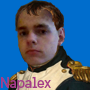
<style>
.page{position:relative;width:90px;height:90px;background:#006dcc}
.page>*{position:absolute;margin:0}
.t1{font:14.7px "SwedenSans";color:#a63b89}
</style>
<div class="page">
<p class="t1" style="left:1px;top:77px;width:50px;height:14px">Napalex</p>
</div>
